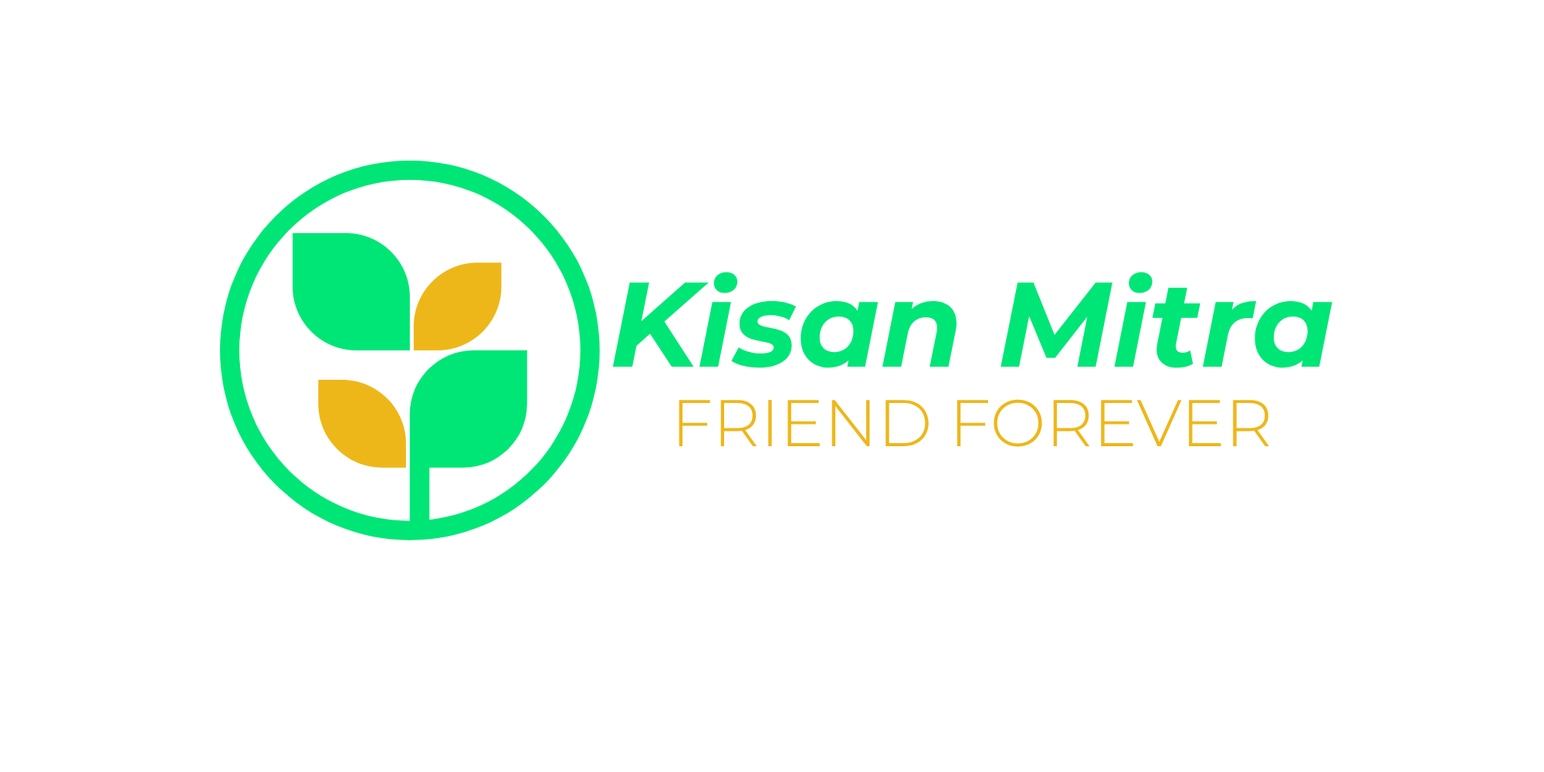
<style>
.page{position:relative;width:1544px;height:772px;background:#ffffff}
.page>*{position:absolute;margin:0}
.t1{font:66px "Montserrat-Light";color:#eeb719}
.t2{font:120.3px "Montserrat-BoldItalic";color:#00e676}
</style>
<div class="page">
<p class="t1" style="left:612px;top:272px;width:721px;height:175px;text-align:center"><span class="t2">Kisan Mitra<br></span>FRIEND FOREVER</p>
</div>
